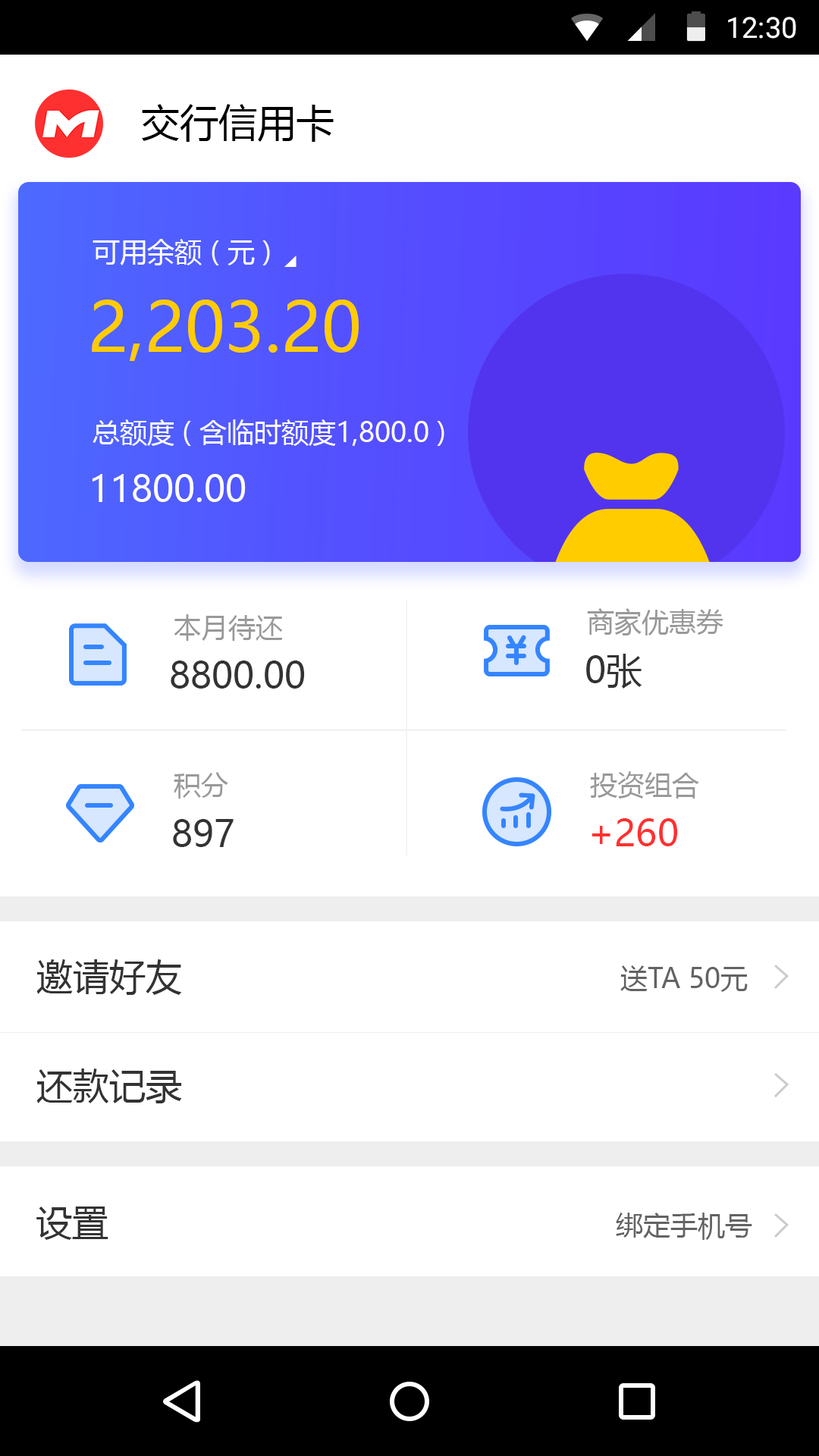
<style>
.page{position:relative;width:819px;height:1456px;background:#ffffff}
.page>*{position:absolute;margin:0}
.t1{font:28.9px "Roboto-Regular";color:#ffffff}
.t2{font:38.7px "MicrosoftYaHei";color:#000000}
.t3{font:27.3px "MicrosoftYaHei";color:#ffffff}
.t4{font:68.2px "MicrosoftYaHei";color:#ffcc00}
.t5{font:36.4px "MicrosoftYaHei";color:#ffffff}
.t6{font:27.3px "MicrosoftYaHei";color:#999999}
.t7{font:36.4px "MicrosoftYaHei";color:#333333}
.t8{font:36.4px "MicrosoftYaHei";color:#ff3030}
.t9{font:27.3px "MicrosoftYaHei";color:#646262}
</style>
<div class="page">
<p class="t1" style="left:728px;top:17px;width:68px;height:22px">12:30</p>
<p class="t2" style="left:142px;top:104px;width:192px;height:38px">交行信用卡</p>
<p class="t3" style="left:93px;top:239px;width:177px;height:26px">可用余额 ( 元 )</p>
<p class="t3" style="left:284px;top:256px;width:13px;height:11px">◢</p>
<p class="t4" style="left:92px;top:300px;width:267px;height:61px">2,203.20</p>
<p class="t3" style="left:93px;top:419px;width:351px;height:27px">总额度 ( 含临时额度1,800.0 )</p>
<p class="t5" style="left:93px;top:474px;width:153px;height:28px">11800.00</p>
<p class="t6" style="left:174px;top:614px;width:109px;height:27px">本月待还</p>
<p class="t6" style="left:587px;top:608px;width:136px;height:27px">商家优惠券</p>
<p class="t7" style="left:586px;top:654px;width:56px;height:35px">0张</p>
<p class="t7" style="left:171px;top:660px;width:134px;height:29px">8800.00</p>
<p class="t6" style="left:174px;top:772px;width:54px;height:27px">积分</p>
<p class="t6" style="left:590px;top:771px;width:109px;height:28px">投资组合</p>
<p class="t7" style="left:173px;top:819px;width:61px;height:28px">897</p>
<p class="t8" style="left:591px;top:818px;width:87px;height:28px">+260</p>
<p class="t7" style="left:36px;top:959px;width:146px;height:36px">邀请好友</p>
<p class="t9" style="left:620px;top:965px;width:128px;height:27px">送TA 50元</p>
<p class="t7" style="left:36px;top:1068px;width:146px;height:35px">还款记录</p>
<p class="t7" style="left:36px;top:1206px;width:72px;height:34px">设置</p>
<p class="t9" style="left:616px;top:1213px;width:136px;height:27px">绑定手机号</p>
</div>
